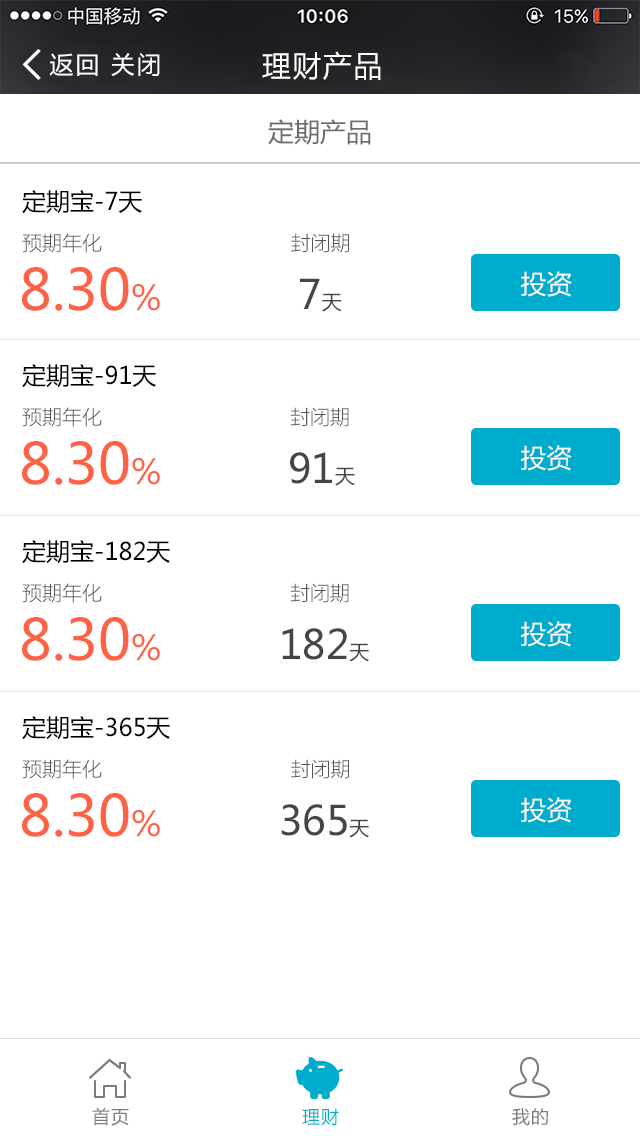
<style>
.page{position:relative;width:640px;height:1136px;background:#ffffff}
.page>*{position:absolute;margin:0}
.t1{font:24px "MicrosoftYaHei";letter-spacing:0.1em;color:#ffffff}
.t2{font:29.1px "MicrosoftYaHei";letter-spacing:0.06em;color:#ffffff}
.t3{font:26px "MicrosoftYaHei";color:#6c6c6c}
.t4{font:24px "MicrosoftYaHei";color:#000000}
.t5{font:20px "MicrosoftYaHeiLight";color:#555555}
.t6{font:56px "MicrosoftYaHei";color:#fe6246}
.t7{font:34px "MicrosoftYaHei";color:#fe6246}
.t8{font:40px "MicrosoftYaHei";color:#454545}
.t9{font:20px "MicrosoftYaHei";color:#454545}
.t10{font:25.6px "MicrosoftYaHei";color:#ffffff}
.t11{font:18px "MicrosoftYaHei";letter-spacing:0.06em;color:#7b7b7b}
.t12{font:18px "MicrosoftYaHei";letter-spacing:0.06em;color:#00accd}
</style>
<div class="page">
<p class="t1" style="left:49px;top:53px;width:111px;height:23px">返回 关闭</p>
<p class="t2" style="left:262px;top:51px;width:119px;height:29px">理财产品</p>
<p class="t3" style="left:268px;top:119px;width:103px;height:26px">定期产品</p>
<p class="t4" style="left:22px;top:190px;width:120px;height:24px">定期宝-7天</p>
<p class="t5" style="left:22px;top:233px;width:80px;height:20px">预期年化</p>
<p class="t5" style="left:291px;top:233px;width:58px;height:20px">封闭期</p>
<p class="t6" style="left:22px;top:267px;width:138px;height:44px">8.30<span class="t7">%</span></p>
<p class="t8" style="left:300px;top:278px;width:42px;height:34px">7<span class="t9">天</span></p>
<p class="t10" style="left:521px;top:271px;width:51px;height:26px">投资</p>
<p class="t4" style="left:22px;top:364px;width:134px;height:24px">定期宝-91天</p>
<p class="t5" style="left:22px;top:407px;width:80px;height:20px">预期年化</p>
<p class="t5" style="left:290px;top:407px;width:59px;height:20px">封闭期</p>
<p class="t6" style="left:22px;top:441px;width:138px;height:44px">8.30<span class="t7">%</span></p>
<p class="t10" style="left:521px;top:445px;width:51px;height:26px">投资</p>
<p class="t8" style="left:290px;top:452px;width:65px;height:34px">91<span class="t9">天</span></p>
<p class="t4" style="left:22px;top:540px;width:148px;height:24px">定期宝-182天</p>
<p class="t5" style="left:22px;top:583px;width:80px;height:20px">预期年化</p>
<p class="t5" style="left:290px;top:583px;width:59px;height:20px">封闭期</p>
<p class="t6" style="left:22px;top:617px;width:138px;height:44px">8.30<span class="t7">%</span></p>
<p class="t8" style="left:282px;top:628px;width:87px;height:34px">182<span class="t9">天</span></p>
<p class="t10" style="left:521px;top:621px;width:51px;height:26px">投资</p>
<p class="t4" style="left:22px;top:716px;width:148px;height:24px">定期宝-365天</p>
<p class="t5" style="left:22px;top:759px;width:80px;height:20px">预期年化</p>
<p class="t5" style="left:291px;top:759px;width:58px;height:20px">封闭期</p>
<p class="t6" style="left:22px;top:793px;width:138px;height:44px">8.30<span class="t7">%</span></p>
<p class="t10" style="left:521px;top:797px;width:51px;height:26px">投资</p>
<p class="t8" style="left:281px;top:804px;width:88px;height:34px">365<span class="t9">天</span></p>
<p class="t11" style="left:92px;top:1107px;width:37px;height:19px">首页</p>
<p class="t12" style="left:302px;top:1108px;width:37px;height:18px">理财</p>
<p class="t11" style="left:512px;top:1108px;width:36px;height:18px">我的</p>
</div>
